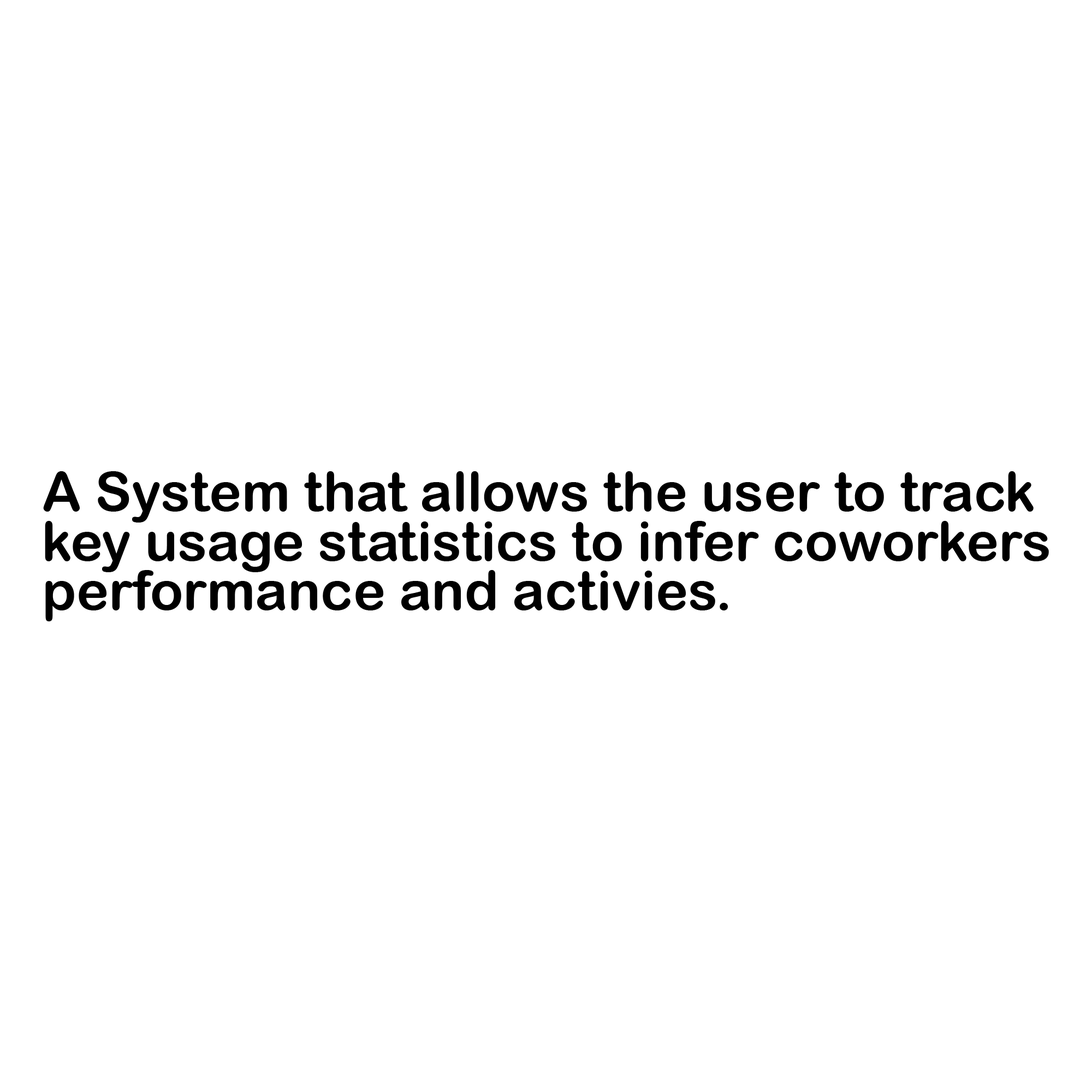
<style>
.page{position:relative;width:1092px;height:1092px;background:#ffffff}
.page>*{position:absolute;margin:0}
.t1{font:54.6px "ArialRoundedMTBold";color:#000000}
</style>
<div class="page">
<p class="t1" style="left:43px;top:471px;width:991px;height:52px">A System that allows the user to track</p>
<p class="t1" style="left:45px;top:521px;width:1004px;height:51px">key usage statistics to infer coworkers</p>
<p class="t1" style="left:45px;top:570px;width:683px;height:51px">performance and activies.</p>
</div>
